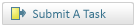
<style>
.page{position:relative;width:136px;height:27px;background:#ffffff}
.page>*{position:absolute;margin:0}
.t1{font:13px "Calibri";color:#38728d}
</style>
<div class="page">
<p class="t1" style="left:33px;top:9px;width:73px;height:9px">Submit A Task</p>
</div>
